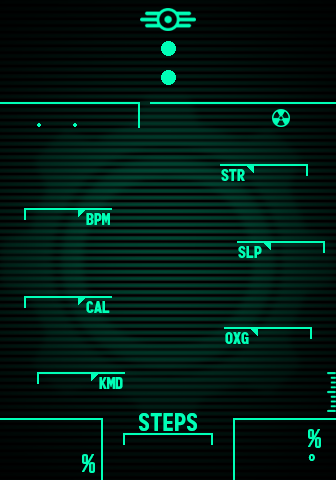
<style>
.page{position:relative;width:336px;height:480px}
.page>*{position:absolute;margin:0}
.t1{font:16px "Monofonto-Regular";color:#00ffb7}
.t2{font:24px "Monofonto-Regular";color:#00ffb7}
.t3{font:13.3px "Monofonto-Regular";color:#00ffb7}
</style>
<div class="page">
<p class="t1" style="left:221px;top:169px;width:24px;height:12px">STR</p>
<p class="t1" style="left:86px;top:213px;width:24px;height:12px">BPM</p>
<p class="t1" style="left:238px;top:246px;width:24px;height:12px">SLP</p>
<p class="t1" style="left:86px;top:301px;width:24px;height:12px">CAL</p>
<p class="t1" style="left:225px;top:332px;width:24px;height:12px">OXG</p>
<p class="t1" style="left:99px;top:377px;width:24px;height:12px">KMD</p>
<p class="t2" style="left:139px;top:413px;width:58px;height:18px">STEPS</p>
<p class="t2" style="left:308px;top:429px;width:13px;height:19px">%</p>
<p class="t2" style="left:82px;top:454px;width:13px;height:19px">%</p>
<p class="t3" style="left:308px;top:454px;width:7px;height:7px">o</p>
</div>
